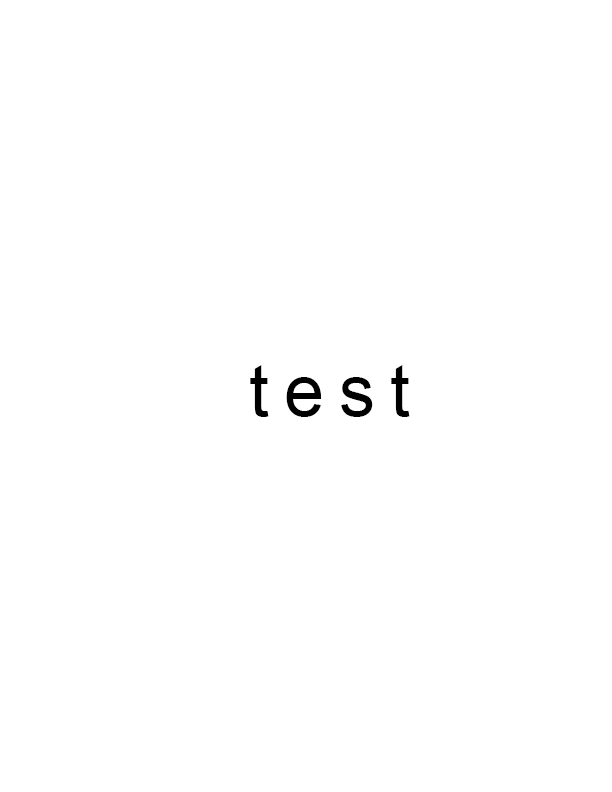
<style>
.page{position:relative;width:612px;height:792px;background:#ffffff}
.page>*{position:absolute;margin:0}
.t1{font:72px "ArialMT";letter-spacing:0.21em;color:#000000}
</style>
<div class="page">
<p class="t1" style="left:250px;top:365px;width:160px;height:52px">test</p>
</div>
